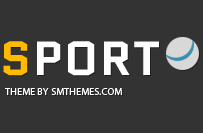
<style>
.page{position:relative;width:203px;height:133px;background:#333333}
.page>*{position:absolute;margin:0}
.t1{font:48px "Quantico-Bold";letter-spacing:0.025em;color:#ffffff;text-transform:uppercase}
.t2{font:48px "Quantico-Bold";letter-spacing:0.025em;color:#ffb900;text-transform:uppercase}
.t3{font:10px "MyriadPro-Regular";letter-spacing:0.025em;color:#ffffff;text-transform:uppercase}
</style>
<div class="page">
<p class="t1" style="left:3px;top:41px;width:156px;height:35px"><span class="t2">S</span>port</p>
<p class="t3" style="left:5px;top:88px;width:117px;height:7px">theme by smthemes.com</p>
</div>
